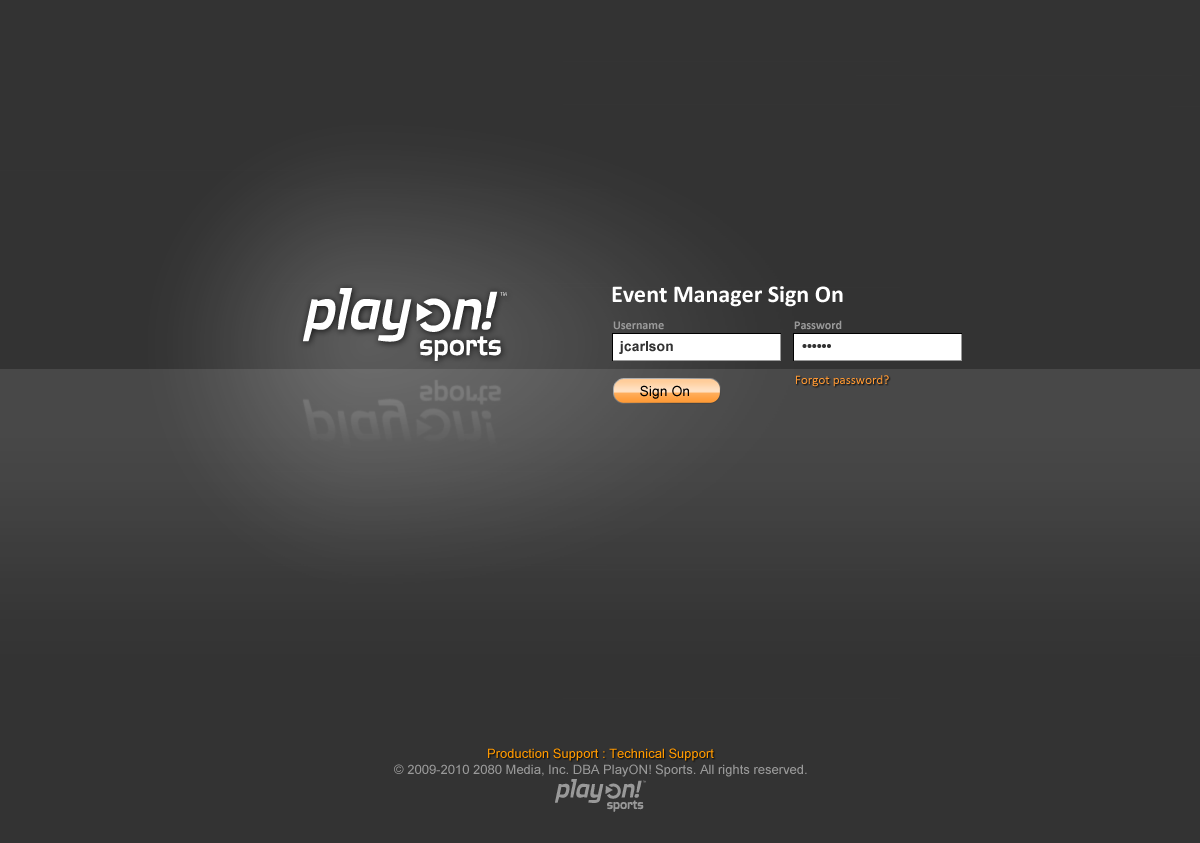
<style>
.page{position:relative;width:1200px;height:843px;background:#333333}
.page>*{position:absolute;margin:0}
.t1{font:24px "Calibri-Bold";color:#ffffff}
.t2{font:12px "Calibri-Bold";color:#999999}
.t3{font:14px "Arial-BoldMT";color:#333333}
.t4{font:13px "Calibri";color:#ff9933}
.t5{font:14px "ArialMT";color:#000000}
.t6{font:13px "ArialMT";color:#ff9900}
.t7{font:13px "ArialMT";color:#999999}
</style>
<div class="page">
<p class="t1" style="left:612px;top:286px;width:231px;height:21px">Event Manager Sign On</p>
<p class="t2" style="left:613px;top:321px;width:51px;height:9px">Username</p>
<p class="t2" style="left:794px;top:320px;width:48px;height:10px">Password</p>
<p class="t3" style="left:619px;top:341px;width:54px;height:13px">jcarlson</p>
<p class="t3" style="left:802px;top:344px;width:29px;height:4px">••••••</p>
<p class="t4" style="left:796px;top:375px;width:93px;height:12px">Forgot password?</p>
<p class="t5" style="left:640px;top:385px;width:49px;height:14px">Sign On</p>
<p class="t6" style="left:488px;top:748px;width:226px;height:13px">Production Support : Technical Support</p>
<p class="t7" style="left:394px;top:764px;width:413px;height:13px">© 2009-2010 2080 Media, Inc. DBA PlayON! Sports. All rights reserved.</p>
</div>
